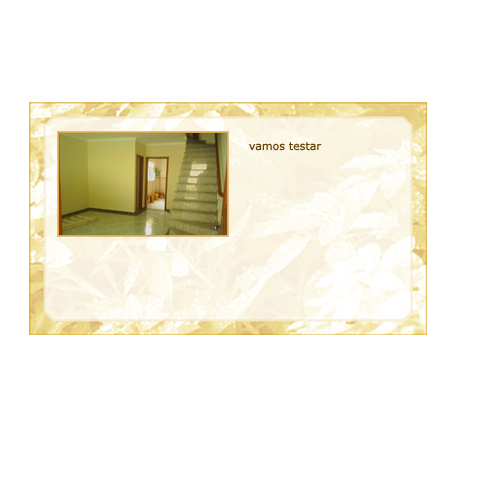
<style>
.page{position:relative;width:500px;height:500px;background:#ffffff}
.page>*{position:absolute;margin:0}
.t1{font:11px "Verdana";color:#6a450a}
</style>
<div class="page">
<p class="t1" style="left:249px;top:142px;width:73px;height:9px">vamos testar</p>
</div>
